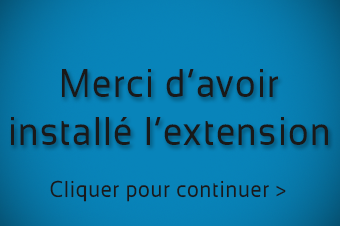
<style>
.page{position:relative;width:340px;height:226px}
.page>*{position:absolute;margin:0}
.t1{font:40.2px/48px "Sansation-Regular";letter-spacing:0.04em;color:#191919;scale:0.87 1}
.t2{font:23px "Sansation-Regular";letter-spacing:0.04em;color:#191919;scale:0.87 1}
</style>
<div class="page">
<p class="t1" style="left:11px;top:69px;width:317px;height:76px;text-align:center">Merci d’avoir<br>installé l’extension</p>
<p class="t2" style="left:50px;top:180px;width:236px;height:22px">Cliquer pour continuer &gt;</p>
</div>
